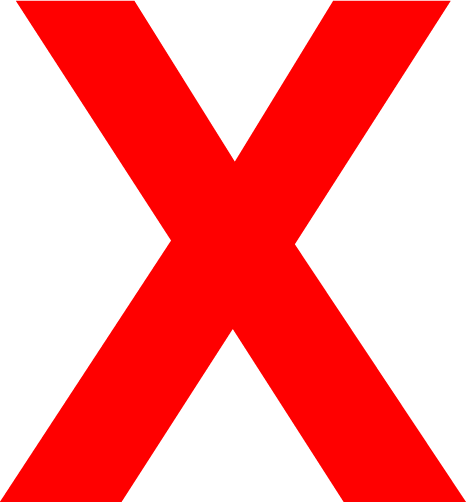
<style>
.page{position:relative;width:466px;height:502px;background:#ffffff}
.page>*{position:absolute;margin:0}
.t1{font:700px "Arial-BoldMT";color:#ff0000}
</style>
<div class="page">
<p class="t1" style="left:0px;top:0px;width:466px;height:502px">X</p>
</div>
